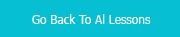
<style>
.page{position:relative;width:180px;height:37px;background:#06bfd3}
.page>*{position:absolute;margin:0}
.t1{font:12px "Tahoma";color:#ffffff}
</style>
<div class="page">
<p class="t1" style="left:32px;top:14px;width:119px;height:10px">Go Back To Al Lessons</p>
</div>
